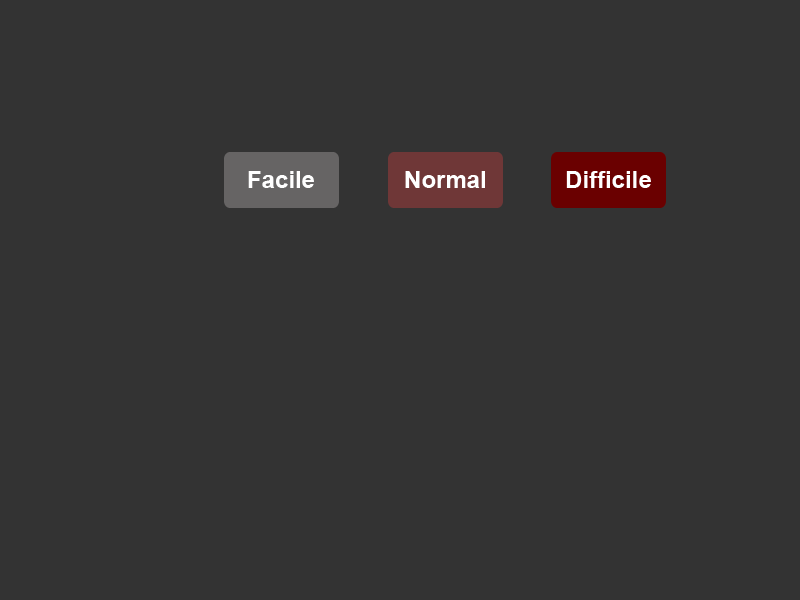
<style>
.page{position:relative;width:800px;height:600px;background:#333333}
.page>*{position:absolute;margin:0}
.t1{font:24px "Arial-BoldMT";color:#ffffff}
</style>
<div class="page">
<p class="t1" style="left:248px;top:171px;width:66px;height:17px">Facile</p>
<p class="t1" style="left:405px;top:171px;width:80px;height:17px">Normal</p>
<p class="t1" style="left:566px;top:171px;width:85px;height:17px">Difficile</p>
</div>
